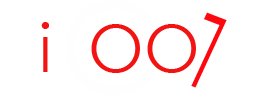
<style>
.page{position:relative;width:266px;height:104px;background:#ffffff}
.page>*{position:absolute;margin:0}
.t1{font:103.2px "CenturyGothic";color:#fc090f;scale:0.58 1}
.t2{font:66.2px "CenturyGothic";color:#f21313}
</style>
<div class="page">
<p class="t1" style="left:191px;top:12px;width:36px;height:76px;rotate:-159deg">L</p>
<p class="t2" style="left:41px;top:22px;width:155px;height:51px">i  OO</p>
</div>
